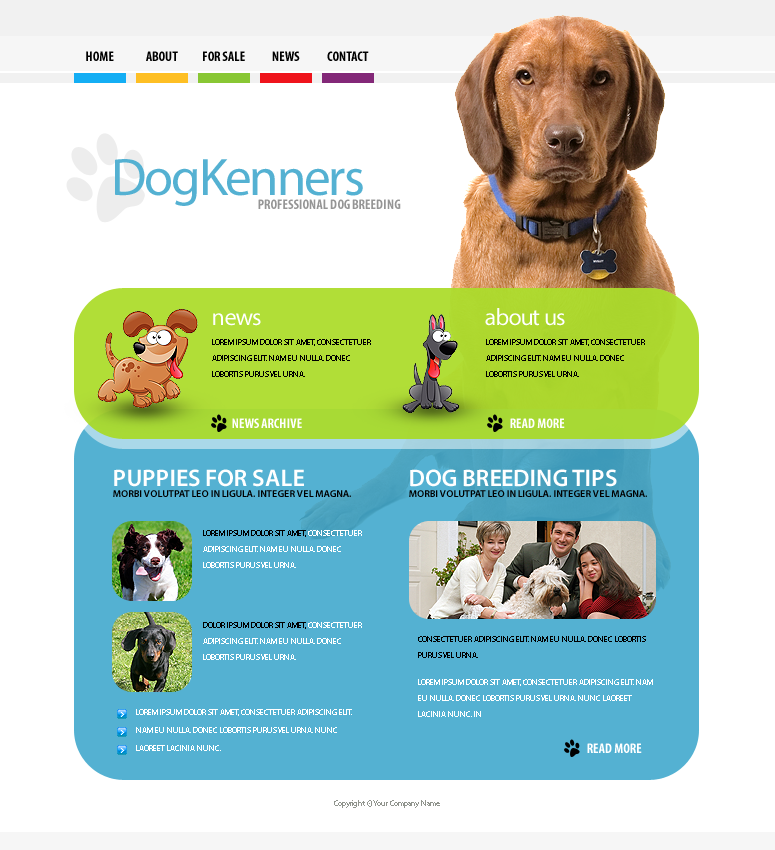
<style>
.page{position:relative;width:775px;height:850px;background:#ffffff}
.page>*{position:absolute;margin:0}
.t1{font:14px "MyriadPro-BoldCond";color:#000000}
.t2{font:53px "MyriadPro-Regular";letter-spacing:-0.04em;color:#54b1d2}
.t3{font:14px "MyriadPro-BoldCond";color:#959595}
.t4{font:24px "MyriadPro-Regular";letter-spacing:-0.04em;color:#ffffff}
.t5{font:8px/16px "MyriadPro-Regular";color:#000000}
.t6{font:14px "MyriadPro-BoldCond";color:#ffffff}
.t7{font:24px "MyriadPro-Semibold";color:#ffffff}
.t8{font:10px "MyriadPro-Semibold";color:#000000}
.t9{font:8px/16px "MyriadPro-Regular";color:#ffffff}
.t10{font:8px/18px "MyriadPro-Regular";color:#ffffff}
.t11{font:8px "MyriadPro-Regular";color:#90948d}
</style>
<div class="page">
<p class="t1" style="left:86px;top:51px;width:28px;height:10px">HOME</p>
<p class="t1" style="left:146px;top:51px;width:32px;height:10px">ABOUT</p>
<p class="t1" style="left:203px;top:51px;width:42px;height:10px">FOR SALE</p>
<p class="t1" style="left:272px;top:51px;width:28px;height:10px">NEWS</p>
<p class="t1" style="left:327px;top:51px;width:42px;height:10px">CONTACT</p>
<p class="t2" style="left:115px;top:159px;width:248px;height:47px">DogKenners</p>
<p class="t3" style="left:258px;top:199px;width:143px;height:10px">PROFESSIONAL DOG BREEDING</p>
<p class="t4" style="left:213px;top:313px;width:48px;height:13px">news</p>
<p class="t4" style="left:485px;top:308px;width:80px;height:18px">about us</p>
<p class="t5" style="left:212px;top:339px;width:159px;height:38px">LOREM IPSUM DOLOR SIT AMET, CONSECTETUER ADIPISCING ELIT. NAM EU NULLA. DONEC LOBORTIS PURUS VEL URNA.</p>
<p class="t5" style="left:486px;top:339px;width:159px;height:38px">LOREM IPSUM DOLOR SIT AMET, CONSECTETUER ADIPISCING ELIT. NAM EU NULLA. DONEC LOBORTIS PURUS VEL URNA.</p>
<p class="t6" style="left:232px;top:418px;width:70px;height:10px">NEWS ARCHIVE</p>
<p class="t6" style="left:510px;top:418px;width:55px;height:10px">READ MORE</p>
<p class="t7" style="left:114px;top:469px;width:190px;height:18px">PUPPIES FOR SALE</p>
<p class="t7" style="left:410px;top:469px;width:207px;height:18px">DOG BREEDING TIPS</p>
<p class="t8" style="left:113px;top:490px;width:238px;height:7px">MORBI VOLUTPAT LEO IN LIGULA. INTEGER VEL MAGNA.</p>
<p class="t8" style="left:409px;top:490px;width:238px;height:7px">MORBI VOLUTPAT LEO IN LIGULA. INTEGER VEL MAGNA.</p>
<p class="t9" style="left:203px;top:530px;width:159px;height:38px"><span class="t5">LOREM IPSUM DOLOR SIT AMET, </span>CONSECTETUER ADIPISCING ELIT. NAM EU NULLA. DONEC LOBORTIS PURUS VEL URNA.</p>
<p class="t9" style="left:203px;top:622px;width:159px;height:38px"><span class="t5">DOLOR IPSUM DOLOR SIT AMET, </span>CONSECTETUER ADIPISCING ELIT. NAM EU NULLA. DONEC LOBORTIS PURUS VEL URNA.</p>
<p class="t5" style="left:418px;top:636px;width:228px;height:22px">CONSECTETUER ADIPISCING ELIT. NAM EU NULLA. DONEC LOBORTIS PURUS VEL URNA.</p>
<p class="t9" style="left:418px;top:679px;width:235px;height:38px">LOREM IPSUM DOLOR SIT AMET, CONSECTETUER ADIPISCING ELIT. NAM EU NULLA. DONEC LOBORTIS PURUS VEL URNA. NUNC LAOREET LACINIA NUNC. IN</p>
<p class="t10" style="left:136px;top:709px;width:216px;height:42px">LOREM IPSUM DOLOR SIT AMET, CONSECTETUER ADIPISCING ELIT. NAM EU NULLA. DONEC LOBORTIS PURUS VEL URNA. NUNC LAOREET LACINIA NUNC.</p>
<p class="t6" style="left:587px;top:743px;width:55px;height:10px">READ MORE</p>
<p class="t11" style="left:334px;top:800px;width:106px;height:8px">Copyright © Your Company Name</p>
</div>
